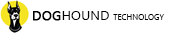
<style>
.page{position:relative;width:170px;height:33px;background:#ffffff}
.page>*{position:absolute;margin:0}
.t1{font:8px "Ebrima";color:#000000}
.t2{font:13.3px "Ebrima";color:#000000;font-weight:bold}
.t3{font:13.3px "Ebrima";color:#000000}
</style>
<div class="page">
<p class="t1" style="left:33px;top:11px;width:131px;height:10px"><span class="t2">DOG</span><span class="t3">HOUND </span>TECHNOLOGY</p>
</div>
